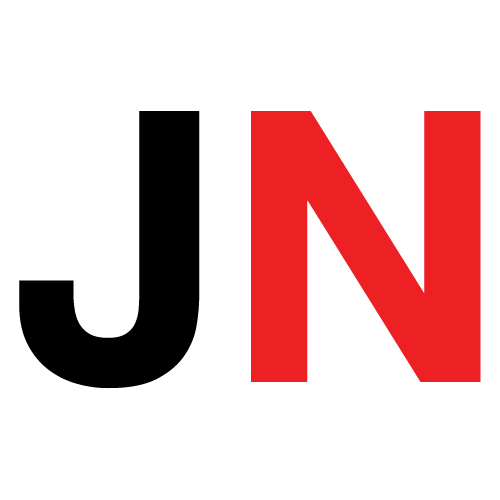
<style>
.page{position:relative;width:500px;height:500px;background:#ffffff}
.page>*{position:absolute;margin:0}
.t1{font:380px "HelveticaNeue-Bold";color:#000000}
.t2{font:380px "HelveticaNeue-Bold";color:#ed2024}
</style>
<div class="page">
<p class="t1" style="left:19px;top:111px;width:462px;height:278px">J<span class="t2">N</span></p>
</div>
